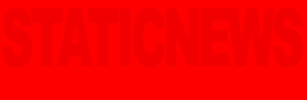
<style>
.page{position:relative;width:307px;height:100px;background:#ff0000}
.page>*{position:absolute;margin:0}
.t1{font:80.6px "Arial-Black";letter-spacing:-0.08em;color:#f00000;scale:0.58 1}
</style>
<div class="page">
<p class="t1" style="left:1px;top:7px;width:302px;height:61px">STATICNEWS</p>
</div>
